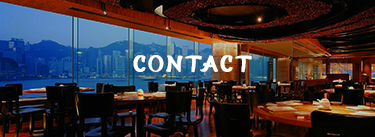
<style>
.page{position:relative;width:375px;height:137px}
.page>*{position:absolute;margin:0}
.t1{font:23.6px "SVN-HiroMisake-Regular";letter-spacing:0.1em;color:#ffffff;font-weight:bold}
</style>
<div class="page">
<p class="t1" style="left:133px;top:55px;width:119px;height:18px">Contact</p>
</div>
